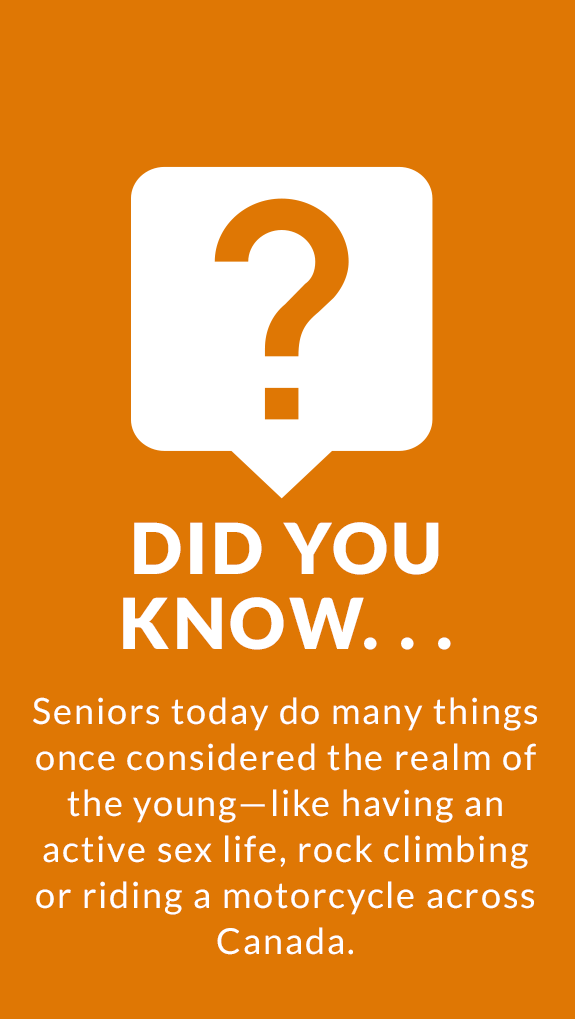
<style>
.page{position:relative;width:575px;height:1019px;background:#df7704}
.page>*{position:absolute;margin:0}
.t1{font:70px/75px "Lato-Black";letter-spacing:0.05em;color:#ffffff;text-transform:uppercase}
.t2{font:36px/46px "Lato-Regular";letter-spacing:0.05em;color:#ffffff}
</style>
<div class="page">
<p class="t1" style="left:123px;top:522px;width:328px;height:128px;text-align:center">DID YOU<br>KNOW. . .</p>
<p class="t2" style="left:33px;top:697px;width:504px;height:258px;text-align:center">Seniors today do many things once considered the realm of the young—like having an active sex life, rock climbing or riding a motorcycle across Canada.</p>
</div>
